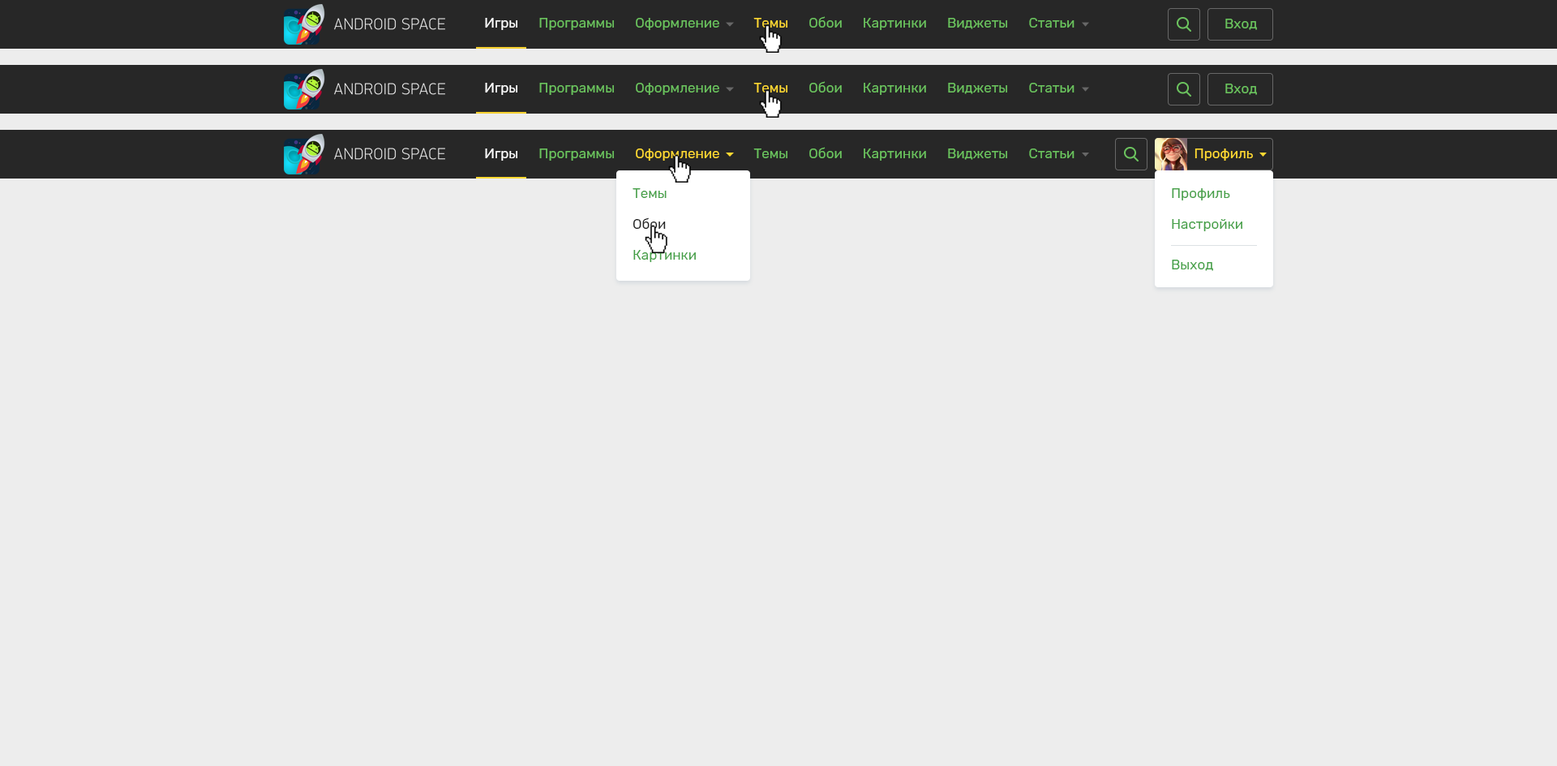
<style>
.page{position:relative;width:1557px;height:766px;background:#ededed}
.page>*{position:absolute;margin:0}
.t1{font:13.9px "Rubik-Regular";color:#6bc35e}
.t2{font:13.9px "Rubik-Regular";color:#ffffff}
.t3{font:13.9px "Rubik-Regular";color:#ffd932}
.t4{font:13.8px "Rubik-Regular";color:#6bc35e}
.t5{font:13.8px "Rubik-Regular";color:#ffffff}
.t6{font:13.8px "Rubik-Regular";color:#ffd932}
.t7{font:13.8px/19.5px "Rubik-Regular";color:#46a148}
.t8{font:13.8px/19.5px "Rubik-Regular";color:#272727}
</style>
<div class="page">
<p class="t1" style="left:485px;top:16px;width:590px;height:14px"><span class="t2">Игры</span>      Программы      Оформление          <span class="t3">Темы</span>      Обои      Картинки      Виджеты      Статьи</p>
<p class="t4" style="left:1226px;top:19px;width:31px;height:11px">Вход</p>
<p class="t1" style="left:485px;top:81px;width:590px;height:14px"><span class="t2">Игры</span>      Программы      Оформление          <span class="t3">Темы</span>      Обои      Картинки      Виджеты      Статьи</p>
<p class="t4" style="left:1226px;top:84px;width:31px;height:11px">Вход</p>
<p class="t4" style="left:485px;top:147px;width:590px;height:14px"><span class="t5">Игры</span>      Программы      <span class="t6">Оформление</span>          Темы      Обои      Картинки      Виджеты      Статьи</p>
<p class="t6" style="left:1195px;top:148px;width:58px;height:13px">Профиль</p>
<p class="t7" style="left:633px;top:188px;width:63px;height:74px">Темы<br><span class="t8">Обои<br></span>Картинки</p>
<p class="t7" style="left:1172px;top:188px;width:71px;height:83px">Профиль<br>Настройки<br>Выход</p>
</div>
